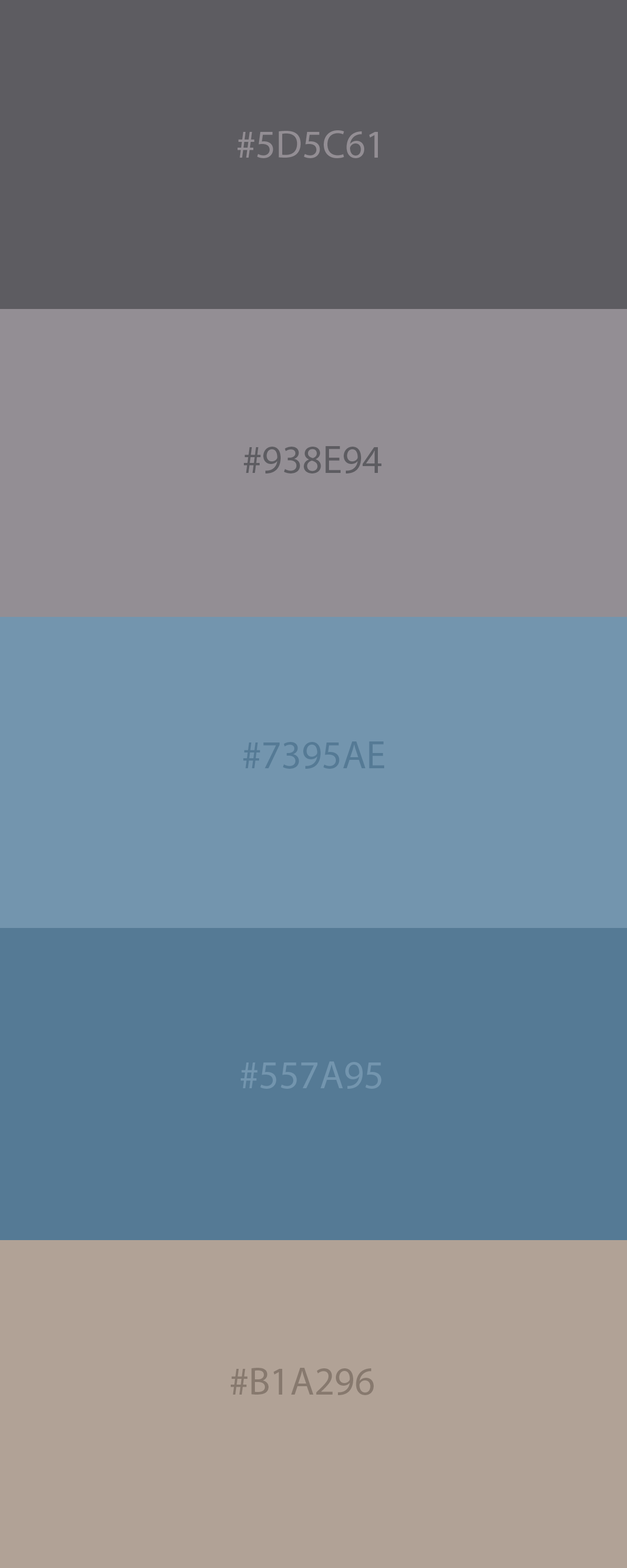
<style>
.page{position:relative;width:627px;height:1568px;background:#7395ae}
.page>*{position:absolute;margin:0}
.t1{font:39.4px "MyriadPro-Regular";color:#938e94}
.t2{font:39.4px "MyriadPro-Regular";color:#5d5c61}
.t3{font:39.4px "MyriadPro-Regular";color:#557a95}
.t4{font:39.4px "MyriadPro-Regular";color:#7395ae}
.t5{font:39.4px "MyriadPro-Regular";color:#87796e}
</style>
<div class="page">
<p class="t1" style="left:238px;top:130px;width:140px;height:28px">#5D5C61</p>
<p class="t2" style="left:244px;top:446px;width:137px;height:27px">#938E94</p>
<p class="t3" style="left:243px;top:741px;width:141px;height:28px">#7395AE</p>
<p class="t4" style="left:241px;top:1061px;width:140px;height:28px">#557A95</p>
<p class="t5" style="left:231px;top:1368px;width:143px;height:27px">#B1A296</p>
</div>
